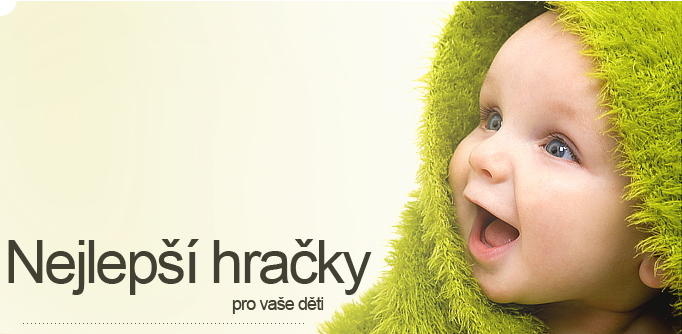
<style>
.page{position:relative;width:682px;height:334px}
.page>*{position:absolute;margin:0}
.t1{font:60px "ArialMT";letter-spacing:-0.05em;color:#424033}
.t2{font:18px "ArialMT";letter-spacing:-0.05em;color:#424033}
</style>
<div class="page">
<p class="t1" style="left:8px;top:239px;width:364px;height:56px">Nejlepší hračky</p>
<p class="t2" style="left:232px;top:297px;width:92px;height:17px">pro vaše děti</p>
</div>
